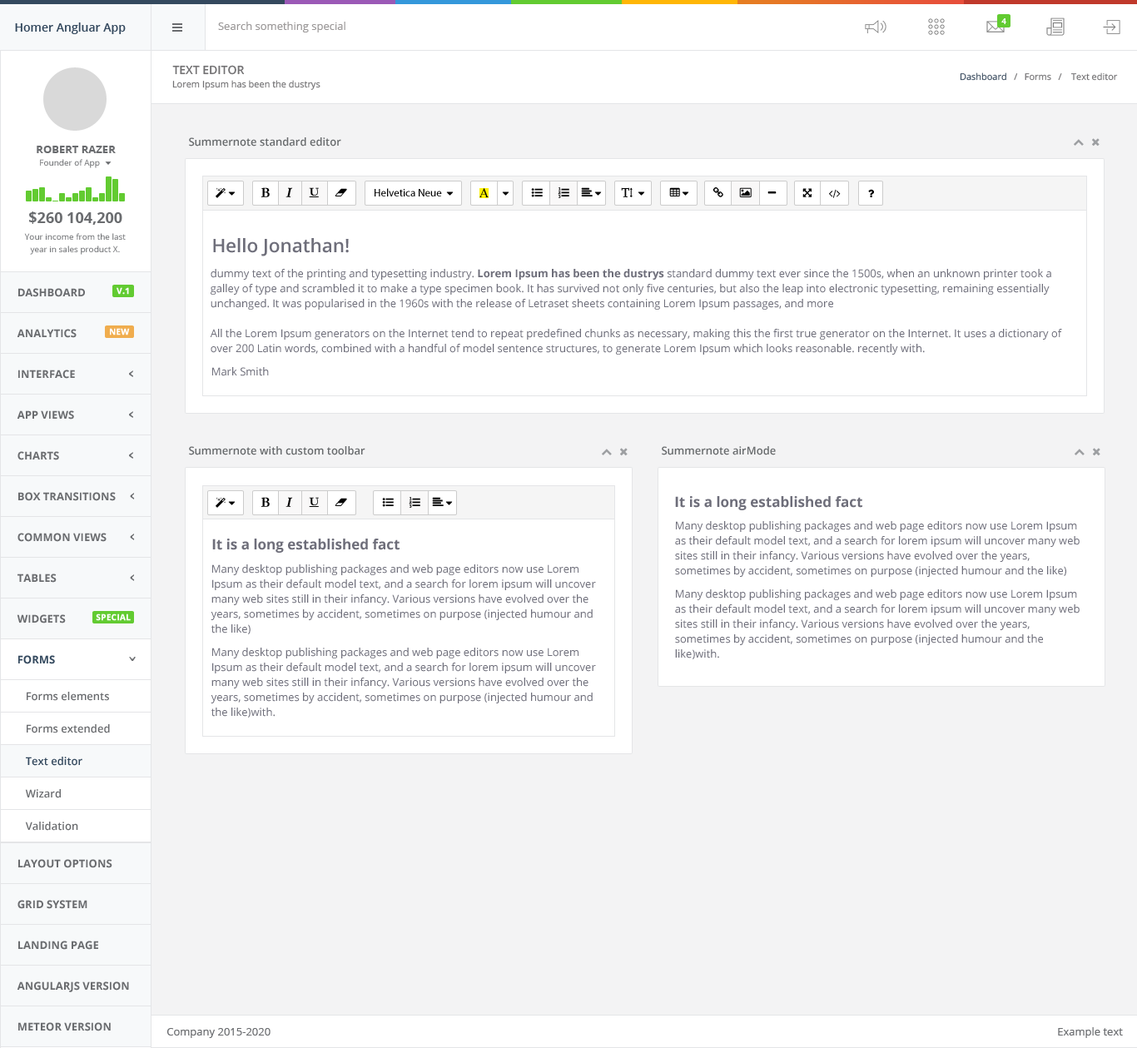
<style>
.page{position:relative;width:1137px;height:1048px;background:#ffffff}
.page>*{position:absolute;margin:0}
.t1{font:11.7px "OpenSans-Semibold";color:#34495e}
.t2{font:10.8px "OpenSans";color:#9c9999}
.t3{font:8.3px "OpenSans-Bold";color:#ffffff}
.t4{font:11.7px "OpenSans-Semibold";color:#727173}
.t5{font:9.2px "OpenSans";color:#727173}
.t6{font:9.2px "OpenSans";color:#3c4d60}
.t7{font:10.8px "OpenSans-Semibold";color:#676a6c}
.t8{font:10.8px "OpenSans-Bold";color:#6a6c6f}
.t9{font:8.3px "OpenSans";color:#6a6c6f}
.t10{font:10.8px "MyriadPro-Regular";color:#000000}
.t11{font:13.3px "TimesNewRomanPSMT";color:#000000}
.t12{font:15px "OpenSans-Bold";color:#6a6c6f}
.t13{font:8.3px/12.5px "OpenSans";color:#6a6c6f}
.t14{font:18.7px "OpenSans-Semibold";color:#6e6e7a}
.t15{font:10.8px/15px "OpenSans";color:#6e6e7a}
.t16{font:10.8px/15px "OpenSans-Bold";color:#6e6e7a}
.t17{font:8.3px "OpenSans-Bold";color:#ffffff;font-weight:bold}
.t18{font:10.8px "OpenSans";color:#6e6e7a}
.t19{font:14.2px "OpenSans-Bold";color:#6e6e7a}
.t20{font:10.8px "OpenSans-Bold";color:#34495e}
.t21{font:10.8px "OpenSans-Semibold";color:#6a6c6f}
.t22{font:10.8px "OpenSans-Semibold";color:#34495e}
.t23{font:10.8px "OpenSans";color:#6a6c6f}
</style>
<div class="page">
<p class="t1" style="left:15px;top:22px;width:111px;height:12px">Homer Angluar App</p>
<p class="t2" style="left:218px;top:22px;width:128px;height:10px">Search something special</p>
<p class="t3" style="left:1002px;top:18px;width:5px;height:6px">4</p>
<p class="t4" style="left:172px;top:65px;width:73px;height:10px">TEXT EDITOR</p>
<p class="t5" style="left:960px;top:72px;width:158px;height:9px"><span class="t6">Dashboard</span>   /   Forms   /    Text editor</p>
<p class="t5" style="left:172px;top:80px;width:149px;height:10px">Lorem Ipsum has been the dustrys</p>
<p class="t7" style="left:189px;top:137px;width:152px;height:10px">Summernote standard editor</p>
<p class="t8" style="left:37px;top:146px;width:79px;height:7px">ROBERT RAZER</p>
<p class="t9" style="left:40px;top:159px;width:60px;height:9px">Founder of App</p>
<p class="t10" style="left:375px;top:188px;width:67px;height:9px">Helvetica Neue</p>
<p class="t11" style="left:480px;top:188px;width:9px;height:9px">A</p>
<p class="t12" style="left:29px;top:212px;width:93px;height:13px">$260 104,200</p>
<p class="t13" style="left:24px;top:233px;width:102px;height:22px;text-align:center">Your income from the last<br>year in sales product X.</p>
<p class="t14" style="left:213px;top:238px;width:136px;height:18px">Hello Jonathan!</p>
<p class="t15" style="left:210px;top:269px;width:853px;height:86px">dummy text of the printing and typesetting industry. <span class="t16">Lorem Ipsum has been the dustrys</span> standard dummy text ever since the 1500s, when an unknown printer took a galley of type and scrambled it to make a type specimen book. It has survived not only five centuries, but also the leap into electronic typesetting, remaining essentially unchanged. It was popularised in the 1960s with the release of Letraset sheets containing Lorem Ipsum passages, and more <br><br>All the Lorem Ipsum generators on the Internet tend to repeat predefined chunks as necessary, making this the first true generator on the Internet. It uses a dictionary of over 200 Latin words, combined with a handful of model sentence structures, to generate Lorem Ipsum which looks reasonable. recently with.</p>
<p class="t8" style="left:18px;top:288px;width:67px;height:9px">DASHBOARD</p>
<p class="t17" style="left:117px;top:287px;width:12px;height:8px">V.1</p>
<p class="t8" style="left:17px;top:329px;width:60px;height:9px">ANALYTICS</p>
<p class="t17" style="left:110px;top:328px;width:20px;height:8px">NEW</p>
<p class="t8" style="left:18px;top:370px;width:57px;height:9px">INTERFACE</p>
<p class="t18" style="left:212px;top:367px;width:57px;height:9px">Mark Smith</p>
<p class="t8" style="left:17px;top:411px;width:57px;height:9px">APP VIEWS</p>
<p class="t7" style="left:189px;top:446px;width:177px;height:9px">Summernote with custom toolbar</p>
<p class="t7" style="left:662px;top:446px;width:114px;height:9px">Summernote airMode</p>
<p class="t8" style="left:17px;top:451px;width:42px;height:9px">CHARTS</p>
<p class="t8" style="left:18px;top:492px;width:98px;height:9px">BOX TRANSITIONS</p>
<p class="t19" style="left:675px;top:496px;width:188px;height:14px">It is a long established fact</p>
<p class="t15" style="left:675px;top:521px;width:405px;height:56px">Many desktop publishing packages and web page editors now use Lorem Ipsum as their default model text, and a search for lorem ipsum will uncover many web sites still in their infancy. Various versions have evolved over the years, sometimes by accident, sometimes on purpose (injected humour and the like)</p>
<p class="t8" style="left:17px;top:533px;width:90px;height:9px">COMMON VIEWS</p>
<p class="t19" style="left:212px;top:539px;width:188px;height:14px">It is a long established fact</p>
<p class="t15" style="left:211px;top:565px;width:385px;height:70px">Many desktop publishing packages and web page editors now use Lorem Ipsum as their default model text, and a search for lorem ipsum will uncover many web sites still in their infancy. Various versions have evolved over the years, sometimes by accident, sometimes on purpose (injected humour and the like)</p>
<p class="t8" style="left:17px;top:574px;width:40px;height:9px">TABLES</p>
<p class="t15" style="left:675px;top:590px;width:405px;height:69px">Many desktop publishing packages and web page editors now use Lorem Ipsum as their default model text, and a search for lorem ipsum will uncover many web sites still in their infancy. Various versions have evolved over the years, sometimes by accident, sometimes on purpose (injected humour and the like)with.</p>
<p class="t8" style="left:17px;top:615px;width:49px;height:9px">WIDGETS</p>
<p class="t17" style="left:96px;top:614px;width:35px;height:7px">SPECIAL</p>
<p class="t15" style="left:211px;top:648px;width:385px;height:70px">Many desktop publishing packages and web page editors now use Lorem Ipsum as their default model text, and a search for lorem ipsum will uncover many web sites still in their infancy. Various versions have evolved over the years, sometimes by accident, sometimes on purpose (injected humour and the like)with.</p>
<p class="t20" style="left:18px;top:655px;width:37px;height:9px">FORMS</p>
<p class="t21" style="left:27px;top:692px;width:82px;height:9px">Forms elements</p>
<p class="t21" style="left:27px;top:724px;width:83px;height:10px">Forms extended</p>
<p class="t22" style="left:26px;top:757px;width:56px;height:9px">Text editor</p>
<p class="t21" style="left:25px;top:789px;width:36px;height:10px">Wizard</p>
<p class="t21" style="left:25px;top:822px;width:53px;height:9px">Validation</p>
<p class="t8" style="left:18px;top:859px;width:94px;height:9px">LAYOUT OPTIONS</p>
<p class="t8" style="left:17px;top:900px;width:70px;height:9px">GRID SYSTEM</p>
<p class="t8" style="left:18px;top:941px;width:80px;height:9px">LANDING PAGE</p>
<p class="t8" style="left:17px;top:982px;width:112px;height:11px">ANGULARJS VERSION</p>
<p class="t8" style="left:18px;top:1023px;width:93px;height:9px">METEOR VERSION</p>
<p class="t23" style="left:167px;top:1028px;width:104px;height:10px">Company 2015-2020</p>
<p class="t23" style="left:1058px;top:1028px;width:65px;height:10px">Example text</p>
</div>
